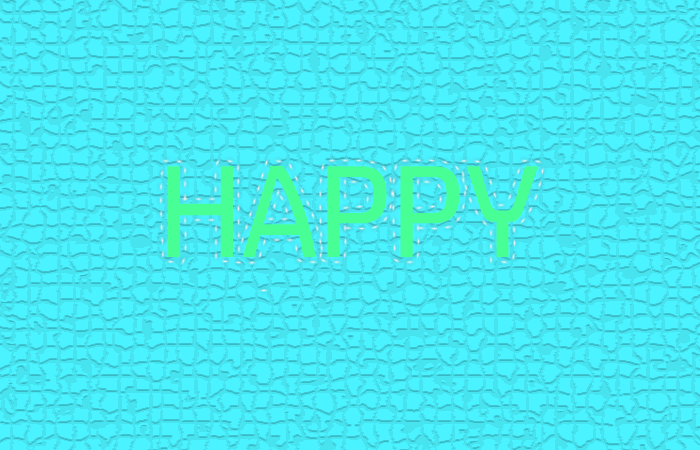
<style>
.page{position:relative;width:700px;height:450px;background:#4bf2ff}
.page>*{position:absolute;margin:0}
.t1{font:116.5px "KHNPHDRegular";color:#48ff96;scale:0.85 1}
</style>
<div class="page">
<p class="t1" style="left:167px;top:166px;width:371px;height:91px">HAPPY</p>
</div>
